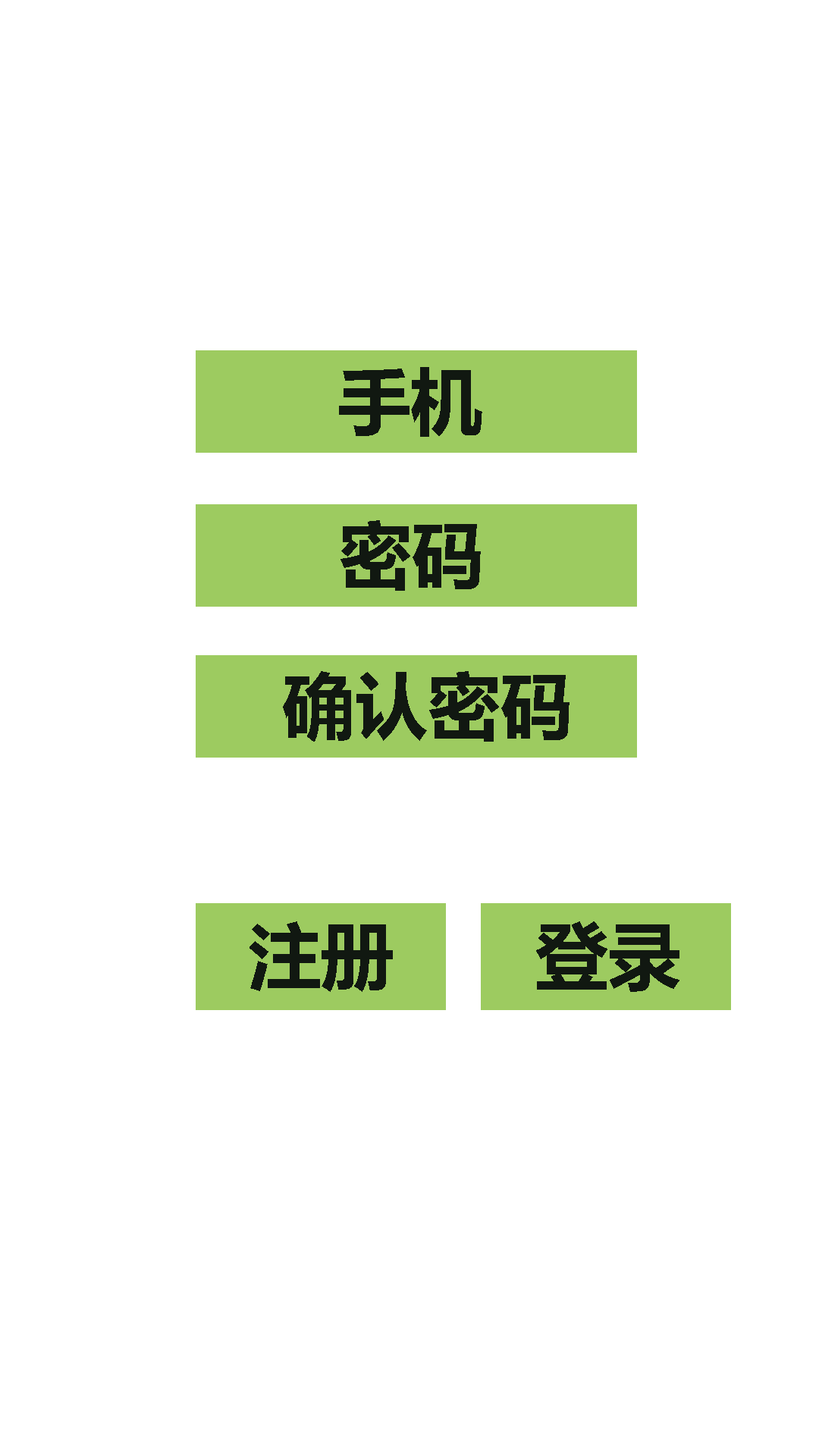
<style>
.page{position:relative;width:819px;height:1456px;background:#ffffff}
.page>*{position:absolute;margin:0}
.t1{font:72.8px "MicrosoftYaHei-Bold";color:#111811}
</style>
<div class="page">
<p class="t1" style="left:339px;top:367px;width:143px;height:70px">手机</p>
<p class="t1" style="left:340px;top:520px;width:141px;height:71px">密码</p>
<p class="t1" style="left:283px;top:671px;width:287px;height:71px">确认密码</p>
<p class="t1" style="left:249px;top:921px;width:144px;height:71px">注册</p>
<p class="t1" style="left:536px;top:921px;width:143px;height:71px">登录</p>
</div>
